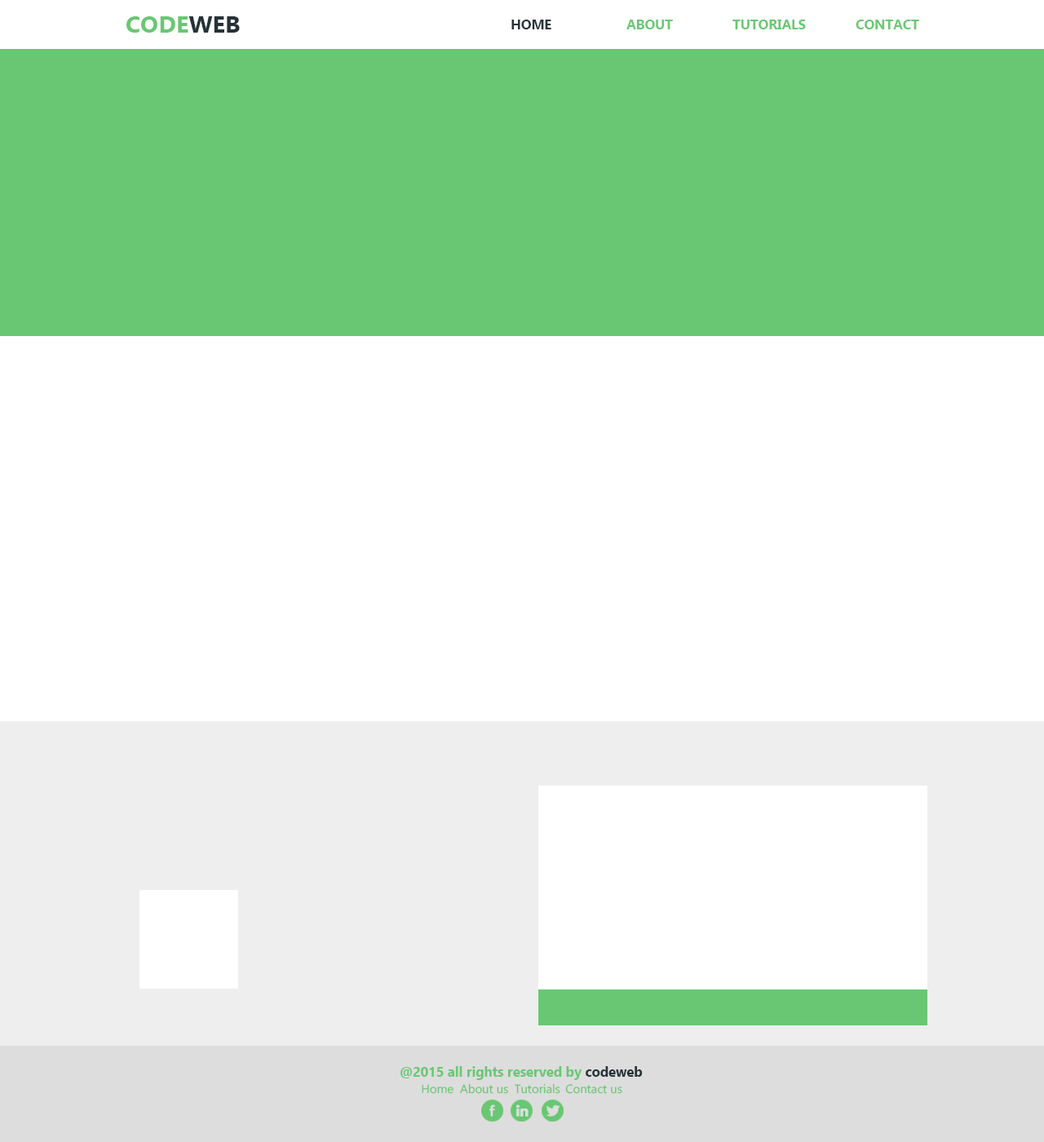
<style>
.page{position:relative;width:1044px;height:1142px;background:#ffffff}
.page>*{position:absolute;margin:0}
.t1{font:23.8px "Ebrima-Bold";color:#69c773}
.t2{font:23.8px "Ebrima-Bold";color:#263238}
.t3{font:13.6px "Ebrima-Bold";color:#263238}
.t4{font:13.6px "Ebrima-Bold";color:#69c773}
.t5{font:12.1px "Ebrima";color:#69c773}
</style>
<div class="page">
<p class="t1" style="left:126px;top:16px;width:114px;height:17px">CODE<span class="t2">WEB</span></p>
<p class="t3" style="left:511px;top:20px;width:40px;height:9px">HOME</p>
<p class="t4" style="left:626px;top:20px;width:47px;height:9px">ABOUT</p>
<p class="t4" style="left:733px;top:20px;width:73px;height:9px">TUTORIALS</p>
<p class="t4" style="left:856px;top:20px;width:63px;height:9px">CONTACT</p>
<p class="t4" style="left:401px;top:1066px;width:242px;height:14px">@2015 all rights reserved by <span class="t3">codeweb</span></p>
<p class="t5" style="left:422px;top:1084px;width:32px;height:10px">Home</p>
<p class="t5" style="left:460px;top:1083px;width:48px;height:11px">About us</p>
<p class="t5" style="left:514px;top:1083px;width:46px;height:11px">Tutorials</p>
<p class="t5" style="left:565px;top:1084px;width:57px;height:10px">Contact us</p>
</div>
